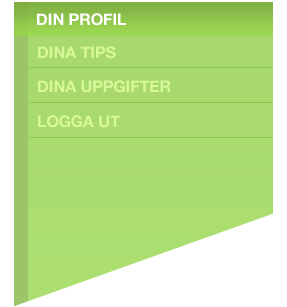
<style>
.page{position:relative;width:287px;height:307px;background:#ffffff}
.page>*{position:absolute;margin:0}
.t1{font:15.9px "HelveticaNeue-Bold";color:#ffffff}
.t2{font:15.9px "HelveticaNeue-Bold";color:#d8f898}
.t3{font:15.9px "HelveticaNeue-Bold";color:#d9f998}
</style>
<div class="page">
<p class="t1" style="left:37px;top:13px;width:89px;height:13px">DIN PROFIL</p>
<p class="t2" style="left:38px;top:46px;width:78px;height:13px">DINA TIPS</p>
<p class="t2" style="left:38px;top:80px;width:133px;height:13px">DINA UPPGIFTER</p>
<p class="t3" style="left:38px;top:115px;width:82px;height:13px">LOGGA UT</p>
</div>
